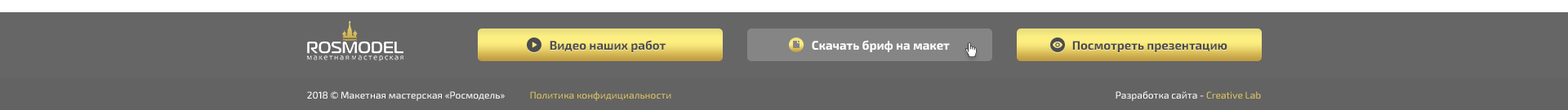
<style>
.page{position:relative;width:1568px;height:110px;background:#666666}
.page>*{position:absolute;margin:0}
.t1{font:12.2px "Exo2-Bold";color:#4d4d4d}
.t2{font:12.2px "Exo2-Bold";color:#ffffff}
.t3{font:9.8px "Exo2-Regular";color:#ffffff}
.t4{font:9.8px "Exo2-Regular";color:#dfc560}
</style>
<div class="page">
<p class="t1" style="left:550px;top:40px;width:116px;height:12px">Видео наших работ</p>
<p class="t2" style="left:812px;top:40px;width:138px;height:12px">Скачать бриф на макет</p>
<p class="t1" style="left:1072px;top:41px;width:155px;height:11px">Посмотреть презентацию</p>
<p class="t3" style="left:307px;top:91px;width:198px;height:10px">2018 © Макетная мастерская «Росмодель»</p>
<p class="t4" style="left:530px;top:91px;width:141px;height:10px">Политика конфидициальности</p>
<p class="t3" style="left:1116px;top:91px;width:145px;height:10px">Разработка сайта - <span class="t4">Creative Lab</span></p>
</div>
